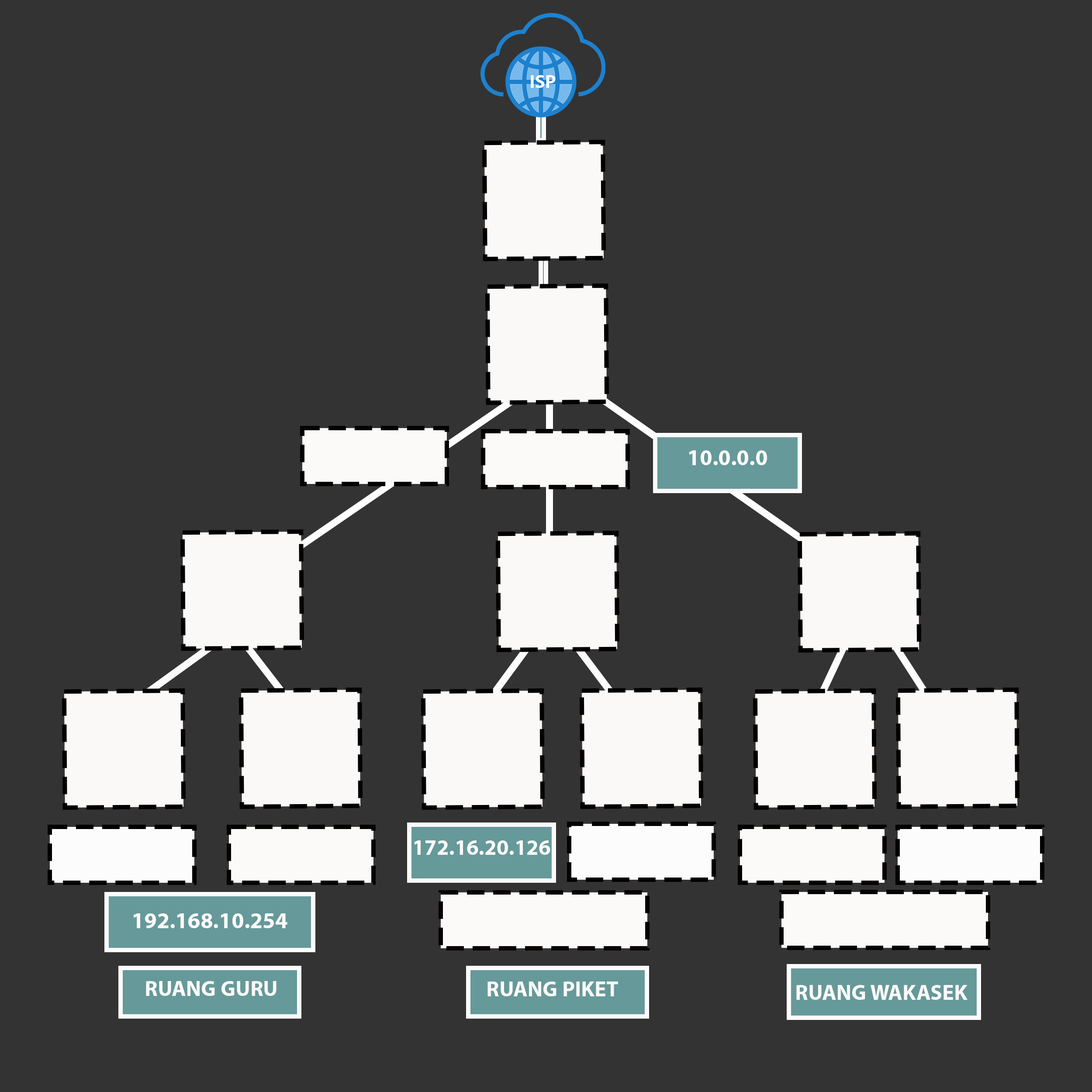
<style>
.page{position:relative;width:1092px;height:1092px;background:#333333}
.page>*{position:absolute;margin:0}
.t1{font:22.7px "MyriadPro-Bold";color:#fcfafa}
.t2{font:21.8px "MyriadPro-Bold";color:#fcfafa}
.t3{font:21.8px "MyriadPro-Bold";color:#fcf9f9}
</style>
<div class="page">
<p class="t1" style="left:689px;top:450px;width:78px;height:15px">10.0.0.0</p>
<p class="t2" style="left:414px;top:840px;width:136px;height:15px">172.16.20.126</p>
<p class="t1" style="left:133px;top:913px;width:154px;height:15px">192.168.10.254</p>
<p class="t3" style="left:146px;top:981px;width:130px;height:15px">RUANG GURU</p>
<p class="t3" style="left:487px;top:981px;width:131px;height:15px">RUANG PIKET</p>
<p class="t3" style="left:796px;top:985px;width:171px;height:15px">RUANG WAKASEK</p>
</div>
